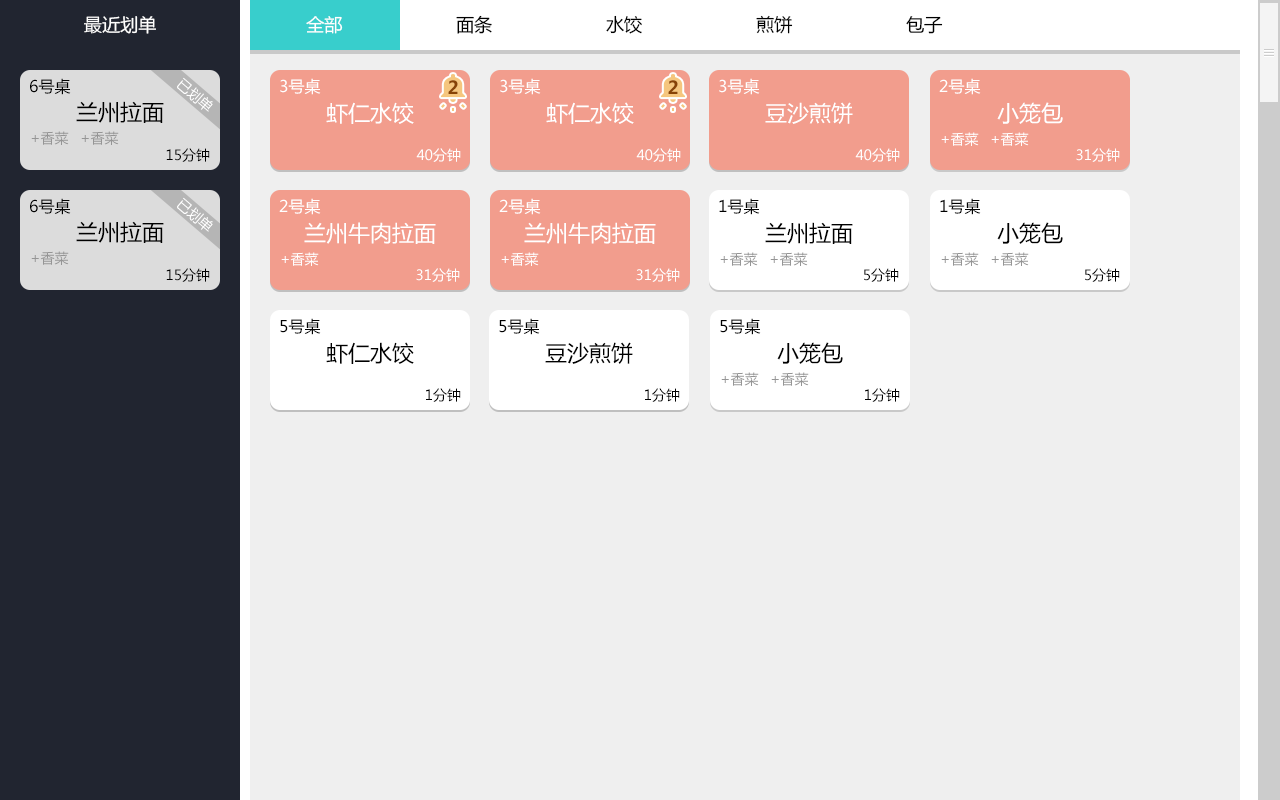
<style>
.page{position:relative;width:1280px;height:800px;background:#efefef}
.page>*{position:absolute;margin:0}
.t1{font:18px "MicrosoftYaHei";color:#ffffff}
.t2{font:18px "MicrosoftYaHei";color:#000000}
.t3{font:16px "MicrosoftYaHei";color:#000000}
.t4{font:16px "MicrosoftYaHei";color:#ffffff}
.t5{font:18px "MicrosoftYaHei-Bold";color:#874306}
.t6{font:22px "MicrosoftYaHei";color:#000000}
.t7{font:22px "MicrosoftYaHei";color:#ffffff}
.t8{font:14px "MicrosoftYaHei";color:#959595}
.t9{font:14px "MicrosoftYaHei";color:#ffffff}
.t10{font:14px "MicrosoftYaHei";color:#000000}
</style>
<div class="page">
<p class="t1" style="left:84px;top:16px;width:72px;height:18px">最近划单</p>
<p class="t1" style="left:306px;top:16px;width:37px;height:18px">全部</p>
<p class="t2" style="left:456px;top:15px;width:36px;height:19px">面条</p>
<p class="t2" style="left:606px;top:15px;width:36px;height:19px">水饺</p>
<p class="t2" style="left:756px;top:15px;width:37px;height:19px">煎饼</p>
<p class="t2" style="left:906px;top:16px;width:37px;height:18px">包子</p>
<p class="t3" style="left:30px;top:78px;width:41px;height:17px">6号桌</p>
<p class="t4" style="left:280px;top:78px;width:41px;height:17px">3号桌</p>
<p class="t4" style="left:500px;top:78px;width:41px;height:17px">3号桌</p>
<p class="t4" style="left:719px;top:78px;width:41px;height:17px">3号桌</p>
<p class="t4" style="left:939px;top:78px;width:42px;height:17px">2号桌</p>
<p class="t5" style="left:448px;top:80px;width:10px;height:14px">2</p>
<p class="t5" style="left:668px;top:80px;width:10px;height:14px">2</p>
<p class="t6" style="left:76px;top:101px;width:88px;height:22px">兰州拉面</p>
<p class="t7" style="left:326px;top:102px;width:88px;height:22px">虾仁水饺</p>
<p class="t7" style="left:546px;top:102px;width:88px;height:22px">虾仁水饺</p>
<p class="t7" style="left:765px;top:102px;width:88px;height:22px">豆沙煎饼</p>
<p class="t7" style="left:997px;top:102px;width:66px;height:22px">小笼包</p>
<p class="t8" style="left:31px;top:131px;width:38px;height:14px">+香菜</p>
<p class="t8" style="left:81px;top:131px;width:38px;height:14px">+香菜</p>
<p class="t9" style="left:941px;top:132px;width:38px;height:14px">+香菜</p>
<p class="t9" style="left:991px;top:132px;width:38px;height:14px">+香菜</p>
<p class="t10" style="left:166px;top:148px;width:44px;height:14px">15分钟</p>
<p class="t9" style="left:416px;top:148px;width:45px;height:14px">40分钟</p>
<p class="t9" style="left:636px;top:148px;width:45px;height:14px">40分钟</p>
<p class="t9" style="left:855px;top:148px;width:45px;height:14px">40分钟</p>
<p class="t9" style="left:1076px;top:148px;width:44px;height:14px">31分钟</p>
<p class="t3" style="left:30px;top:198px;width:41px;height:17px">6号桌</p>
<p class="t4" style="left:279px;top:198px;width:42px;height:17px">2号桌</p>
<p class="t4" style="left:499px;top:198px;width:42px;height:17px">2号桌</p>
<p class="t3" style="left:719px;top:198px;width:41px;height:17px">1号桌</p>
<p class="t3" style="left:940px;top:198px;width:41px;height:17px">1号桌</p>
<p class="t6" style="left:76px;top:221px;width:88px;height:22px">兰州拉面</p>
<p class="t7" style="left:304px;top:222px;width:132px;height:22px">兰州牛肉拉面</p>
<p class="t7" style="left:524px;top:222px;width:132px;height:22px">兰州牛肉拉面</p>
<p class="t6" style="left:765px;top:222px;width:88px;height:22px">兰州拉面</p>
<p class="t6" style="left:997px;top:222px;width:66px;height:22px">小笼包</p>
<p class="t8" style="left:31px;top:251px;width:38px;height:14px">+香菜</p>
<p class="t9" style="left:281px;top:252px;width:38px;height:14px">+香菜</p>
<p class="t9" style="left:501px;top:252px;width:38px;height:14px">+香菜</p>
<p class="t8" style="left:720px;top:252px;width:38px;height:14px">+香菜</p>
<p class="t8" style="left:770px;top:252px;width:38px;height:14px">+香菜</p>
<p class="t8" style="left:941px;top:252px;width:38px;height:14px">+香菜</p>
<p class="t8" style="left:991px;top:252px;width:38px;height:14px">+香菜</p>
<p class="t10" style="left:166px;top:268px;width:44px;height:14px">15分钟</p>
<p class="t9" style="left:416px;top:268px;width:44px;height:14px">31分钟</p>
<p class="t9" style="left:636px;top:268px;width:44px;height:14px">31分钟</p>
<p class="t10" style="left:864px;top:268px;width:35px;height:14px">5分钟</p>
<p class="t10" style="left:1085px;top:268px;width:35px;height:14px">5分钟</p>
<p class="t3" style="left:280px;top:318px;width:41px;height:17px">5号桌</p>
<p class="t3" style="left:499px;top:318px;width:41px;height:17px">5号桌</p>
<p class="t3" style="left:720px;top:318px;width:41px;height:17px">5号桌</p>
<p class="t6" style="left:326px;top:342px;width:88px;height:22px">虾仁水饺</p>
<p class="t6" style="left:545px;top:342px;width:88px;height:22px">豆沙煎饼</p>
<p class="t6" style="left:777px;top:342px;width:66px;height:22px">小笼包</p>
<p class="t8" style="left:721px;top:372px;width:38px;height:14px">+香菜</p>
<p class="t8" style="left:771px;top:372px;width:38px;height:14px">+香菜</p>
<p class="t10" style="left:426px;top:388px;width:35px;height:14px">1分钟</p>
<p class="t10" style="left:645px;top:388px;width:35px;height:14px">1分钟</p>
<p class="t10" style="left:865px;top:388px;width:35px;height:14px">1分钟</p>
</div>
